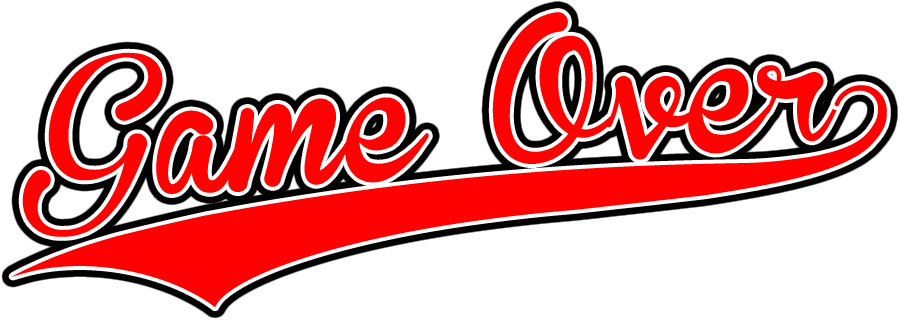
<style>
.page{position:relative;width:900px;height:320px;background:#ffffff}
.page>*{position:absolute;margin:0}
.t1{font:137.1px "BrannbollFet";color:#ff0101}
.t2{font:137.1px "BrannbollFet";color:#ff0000}
</style>
<div class="page">
<p class="t1" style="left:22px;top:12px;width:819px;height:225px;rotate:-5deg">Game Over</p>
<p class="t2" style="left:12px;top:85px;width:875px;height:223px;rotate:-7deg">9</p>
</div>
